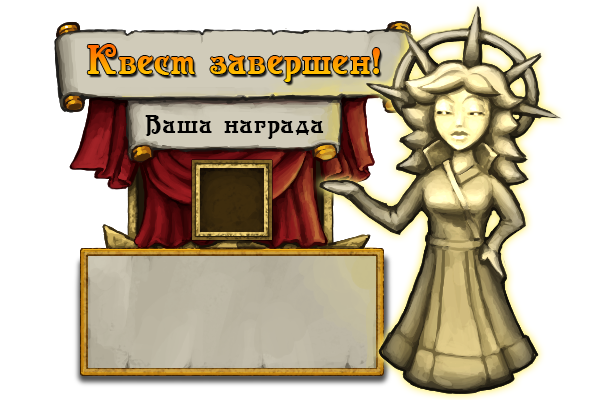
<style>
.page{position:relative;width:600px;height:400px;background:#ffffff}
.page>*{position:absolute;margin:0}
.t1{font:36px "Casanova";letter-spacing:0.03em}
.t2{font:42px "Casanova";letter-spacing:0.03em}
.t3{font:26px "Casanova";letter-spacing:0.04em;color:#000000}
</style>
<div class="page">
<p class="t1" style="left:87px;top:44px;width:293px;height:38px"><span class="t2">К</span>вест завершен!</p>
<p class="t3" style="left:145px;top:115px;width:179px;height:24px">Ваша награда</p>
</div>
